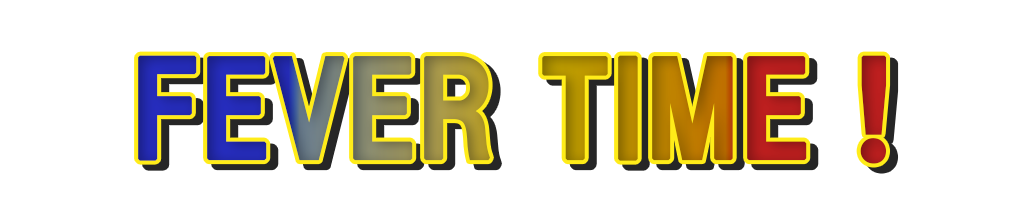
<style>
.page{position:relative;width:1024px;height:218px;background:#ffffff}
.page>*{position:absolute;margin:0}
.t1{font:125px "HGPSoeiKakugothicUB";font-weight:bold}
</style>
<div class="page">
<p class="t1" style="left:138px;top:55px;width:749px;height:109px">FEVER TIME !</p>
</div>
